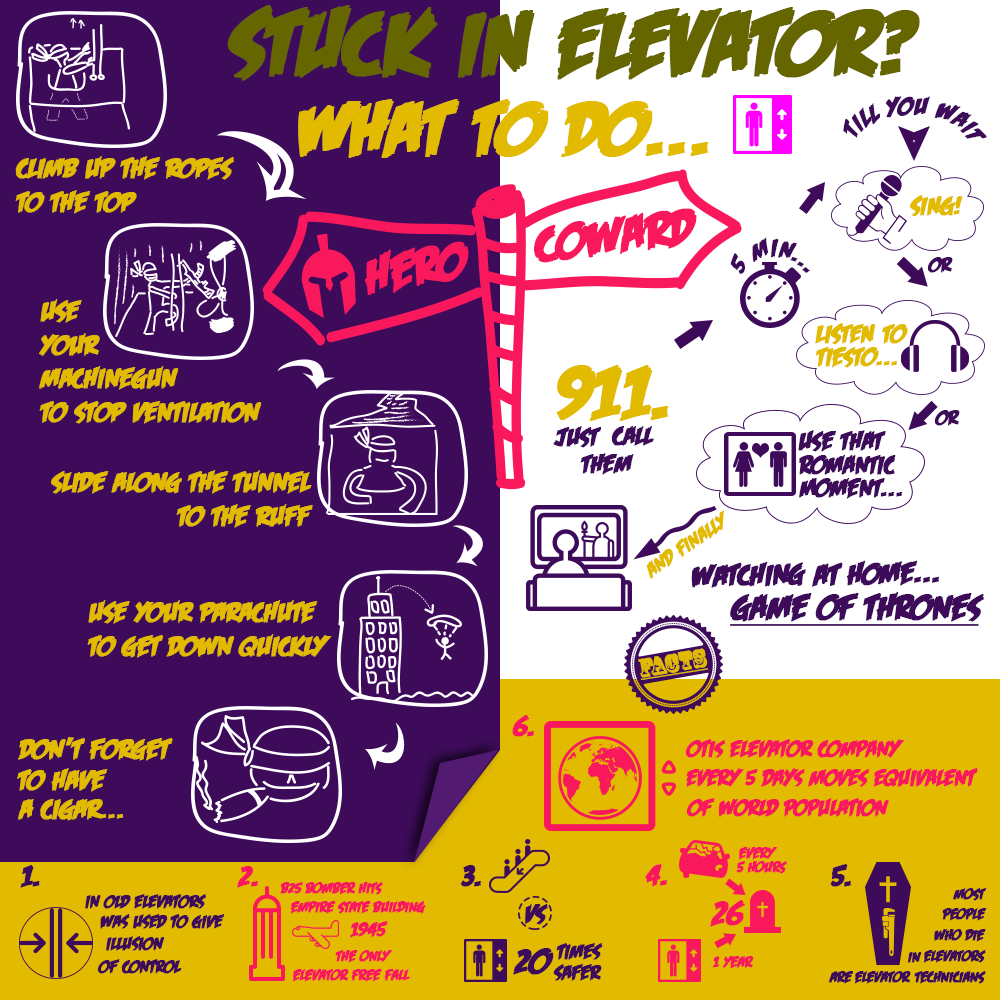
<style>
.page{position:relative;width:1000px;height:1000px;background:#3e0b5b}
.page>*{position:absolute;margin:0}
.t1{font:91.4px "FeastofFleshBBItalic";color:#666600;font-weight:bold}
.t2{font:76.2px "FeastofFleshBBItalic";color:#e2ba00;font-weight:bold}
.t3{font:25.4px "FeastofFleshBBItalic";color:#3e0b5b;font-weight:bold}
.t4{font:27.9px/15.2px "FeastofFleshBBItalic";color:#e2ba00;font-weight:bold}
.t5{font:27.9px "FeastofFleshBBItalic";color:#e2ba00;font-weight:bold}
.t6{font:25.4px "FeastofFleshBBItalic";color:#e2ba00;font-weight:bold}
.t7{font:50.9px "FeastofFleshBBItalic";color:#fa185d;font-weight:bold}
.t8{font:20.3px "FeastofFleshBBItalic";color:#3e0b5b;font-weight:bold}
.t9{font:20.3px "FeastofFleshBBItalic";color:#e2ba00;font-weight:bold}
.t10{font:30.5px "FeastofFleshBBItalic";color:#3e0b5b;font-weight:bold}
.t11{font:35.6px "FeastofFleshBBItalic";color:#3e0b5b;font-weight:bold;text-decoration:underline}
.t12{font:24.3px "RosewoodStd-Regular";color:#e2ba00;font-weight:bold;text-decoration:underline}
.t13{font:30.5px "FeastofFleshBBItalic";color:#fa185d;font-weight:bold}
.t14{font:22.9px "FeastofFleshBBItalic";color:#fa185d;font-weight:bold}
.t15{font:15.2px "FeastofFleshBBItalic";color:#fa185d;font-weight:bold}
.t16{font:30.5px "FeastofFleshBBItalic";color:#3e0b5b;text-transform:uppercase;font-weight:bold}
.t17{font:12px "FeastofFleshBBItalic";color:#3e0b5b;font-weight:bold}
.t18{font:17.8px "FeastofFleshBBItalic";color:#3e0b5b;font-weight:bold}
.t19{font:15.2px "FeastofFleshBBItalic";color:#3e0b5b;font-weight:bold}
.t20{font:35.6px "FeastofFleshBBItalic";color:#fa185d;font-weight:bold}
.t21{font:20.3px "FeastofFleshBBItalic";color:#fa185d;font-weight:bold}
.t22{font:35.6px "FeastofFleshBBItalic";color:#3e0b5b;font-weight:bold}
</style>
<div class="page">
<p class="t1" style="left:227px;top:5px;width:693px;height:76px">STUCK IN ELEVATOR?</p>
<p class="t2" style="left:298px;top:99px;width:410px;height:59px">WHAT TO DO...</p>
<p class="t3" style="left:843px;top:96px;width:144px;height:43px">till you wait</p>
<p class="t4" style="left:15px;top:156px;width:219px;height:58px"><span class="t5">clim</span>b up the ropes <br>to the<span class="t5"> top</span></p>
<p class="t6" style="left:910px;top:195px;width:53px;height:22px">SING!</p>
<p class="t7" style="left:534px;top:208px;width:163px;height:55px;rotate:-7deg">Coward</p>
<p class="t7" style="left:365px;top:241px;width:104px;height:54px;rotate:-10deg">hero</p>
<p class="t3" style="left:730px;top:237px;width:80px;height:37px;rotate:-41deg">5 min...</p>
<p class="t8" style="left:927px;top:257px;width:26px;height:16px">or</p>
<p class="t5" style="left:39px;top:299px;width:223px;height:125px">use <br>your <br>machinegun<br>to stop ventilation</p>
<p class="t6" style="left:815px;top:323px;width:93px;height:22px">LISTEN TO</p>
<p class="t6" style="left:815px;top:347px;width:82px;height:21px">tiesto...</p>
<p class="t2" style="left:556px;top:365px;width:112px;height:56px">911.</p>
<p class="t8" style="left:934px;top:410px;width:26px;height:16px">or</p>
<p class="t3" style="left:553px;top:426px;width:49px;height:22px">just</p>
<p class="t3" style="left:611px;top:426px;width:43px;height:20px">Call</p>
<p class="t3" style="left:798px;top:430px;width:88px;height:22px">use that</p>
<p class="t3" style="left:580px;top:453px;width:54px;height:22px">them</p>
<p class="t3" style="left:799px;top:455px;width:97px;height:20px">Romantic</p>
<p class="t5" style="left:51px;top:470px;width:262px;height:58px">slide along the tunnel<br>               to the ruff</p>
<p class="t3" style="left:799px;top:478px;width:103px;height:21px">Moment...</p>
<p class="t9" style="left:646px;top:510px;width:78px;height:69px;rotate:-34deg">and finally</p>
<p class="t10" style="left:691px;top:561px;width:115px;height:27px;rotate:-1deg">watching</p>
<p class="t10" style="left:812px;top:560px;width:127px;height:27px;rotate:-1deg">at home...</p>
<p class="t11" style="left:730px;top:592px;width:254px;height:34px">game of thrones</p>
<p class="t5" style="left:87px;top:600px;width:245px;height:58px">use your parachute<br>to get down quickly</p>
<p class="t12" style="left:638px;top:648px;width:71px;height:33px;rotate:-9deg">facts</p>
<p class="t13" style="left:512px;top:715px;width:22px;height:22px">6.</p>
<p class="t5" style="left:18px;top:737px;width:155px;height:24px">don’t forget</p>
<p class="t14" style="left:685px;top:739px;width:219px;height:19px">otis elevator company</p>
<p class="t5" style="left:17px;top:768px;width:91px;height:24px">to have</p>
<p class="t14" style="left:686px;top:768px;width:292px;height:19px">every 5 days moves equivalent</p>
<p class="t14" style="left:686px;top:798px;width:203px;height:19px">of world population</p>
<p class="t5" style="left:18px;top:799px;width:106px;height:22px">a cigar...</p>
<p class="t15" style="left:738px;top:847px;width:40px;height:13px">every</p>
<p class="t16" style="left:20px;top:865px;width:20px;height:23px">1.</p>
<p class="t13" style="left:237px;top:866px;width:21px;height:22px">2.</p>
<p class="t10" style="left:460px;top:865px;width:21px;height:22px">3.</p>
<p class="t13" style="left:645px;top:864px;width:22px;height:23px">4.</p>
<p class="t15" style="left:736px;top:861px;width:51px;height:13px">5 hours</p>
<p class="t17" style="left:830px;top:864px;width:21px;height:23px">5.</p>
<p class="t18" style="left:85px;top:894px;width:121px;height:15px">In old elevators</p>
<p class="t15" style="left:280px;top:882px;width:103px;height:13px">b25 bomber hits</p>
<p class="t19" style="left:953px;top:888px;width:33px;height:13px">most</p>
<p class="t15" style="left:290px;top:901px;width:136px;height:13px">empire state building</p>
<p class="t3" style="left:525px;top:904px;width:23px;height:21px">vs</p>
<p class="t20" style="left:710px;top:900px;width:35px;height:27px">26</p>
<p class="t18" style="left:100px;top:914px;width:125px;height:15px">was used to give</p>
<p class="t19" style="left:942px;top:908px;width:45px;height:13px">people</p>
<p class="t21" style="left:350px;top:921px;width:38px;height:17px">1945</p>
<p class="t19" style="left:934px;top:929px;width:52px;height:13px">who die</p>
<p class="t18" style="left:106px;top:936px;width:59px;height:15px">illusion</p>
<p class="t15" style="left:335px;top:950px;width:58px;height:13px">the only</p>
<p class="t22" style="left:513px;top:948px;width:41px;height:27px">20</p>
<p class="t8" style="left:556px;top:943px;width:47px;height:17px">times</p>
<p class="t19" style="left:908px;top:952px;width:14px;height:11px">in</p>
<p class="t19" style="left:923px;top:950px;width:63px;height:13px">elevators</p>
<p class="t18" style="left:97px;top:959px;width:85px;height:15px">of control</p>
<p class="t8" style="left:553px;top:964px;width:49px;height:17px">safer</p>
<p class="t15" style="left:712px;top:956px;width:42px;height:13px">1 year</p>
<p class="t15" style="left:292px;top:969px;width:118px;height:13px">elevator free fall</p>
<p class="t19" style="left:829px;top:971px;width:25px;height:13px">are</p>
<p class="t19" style="left:854px;top:971px;width:57px;height:13px">elevator</p>
<p class="t19" style="left:914px;top:971px;width:72px;height:13px">technicians</p>
</div>
